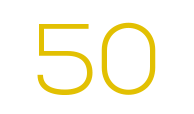
<style>
.page{position:relative;width:194px;height:114px;background:#ffffff}
.page>*{position:absolute;margin:0}
.t1{font:100.5px "NexaLight";color:#e2c002}
</style>
<div class="page">
<p class="t1" style="left:37px;top:22px;width:119px;height:73px">50</p>
</div>
